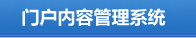
<style>
.page{position:relative;width:196px;height:38px}
.page>*{position:absolute;margin:0}
.t1{font:18px "MicrosoftYaHei-Bold";color:#ffffff}
</style>
<div class="page">
<p class="t1" style="left:22px;top:8px;width:144px;height:18px">门户内容管理系统</p>
</div>
